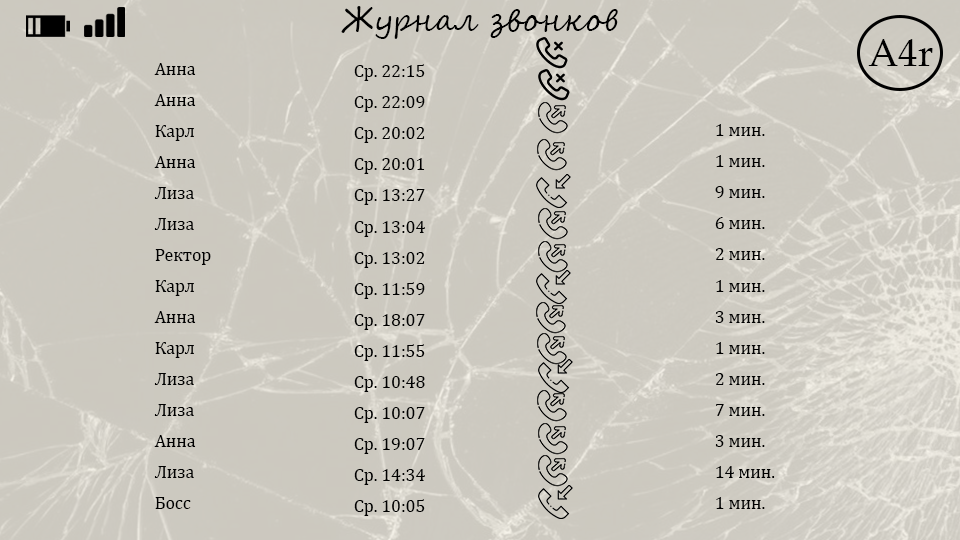
<style>
.page{position:relative;width:960px;height:540px}
.page>*{position:absolute;margin:0}
.t1{font:31px "SegoeScript";color:#000000}
.t2{font:38.8px "BookAntiqua";color:#000000}
.t3{font:17.8px/31px "CambriaMath";color:#000000}
</style>
<div class="page">
<p class="t1" style="left:341px;top:6px;width:277px;height:33px">Журнал звонков</p>
<p class="t2" style="left:868px;top:39px;width:65px;height:27px">A4r</p>
<p class="t3" style="left:154px;top:63px;width:57px;height:446px">Анна <br>Анна  <br>Карл  <br>Анна  <br>Лиза  <br>Лиза <br>Ректор  <br>Карл  <br>Анна  <br>Карл  <br>Лиза  <br>Лиза  <br>Анна  <br>Лиза<br>Босс</p>
<p class="t3" style="left:354px;top:64px;width:71px;height:452px">Ср. 22:15<br>Ср. 22:09<br>Ср. 20:02  <br>Ср. 20:01  <br>Ср. 13:27  <br>Ср. 13:04    <br>Ср. 13:02  <br>Ср. 11:59  <br>Ср. 18:07  <br>Ср. 11:55  <br>Ср. 10:48  <br>Ср. 10:07  <br>Ср. 19:07  <br>Ср. 14:34  <br>Ср. 10:05</p>
<p class="t3" style="left:715px;top:124px;width:60px;height:385px">1 мин.<br>1 мин.<br>9 мин.<br>6 мин.<br>2 мин.<br>1 мин.<br>3 мин.<br>1 мин.<br>2 мин.<br>7 мин.<br>3 мин.<br>14 мин.<br>1 мин.</p>
</div>
